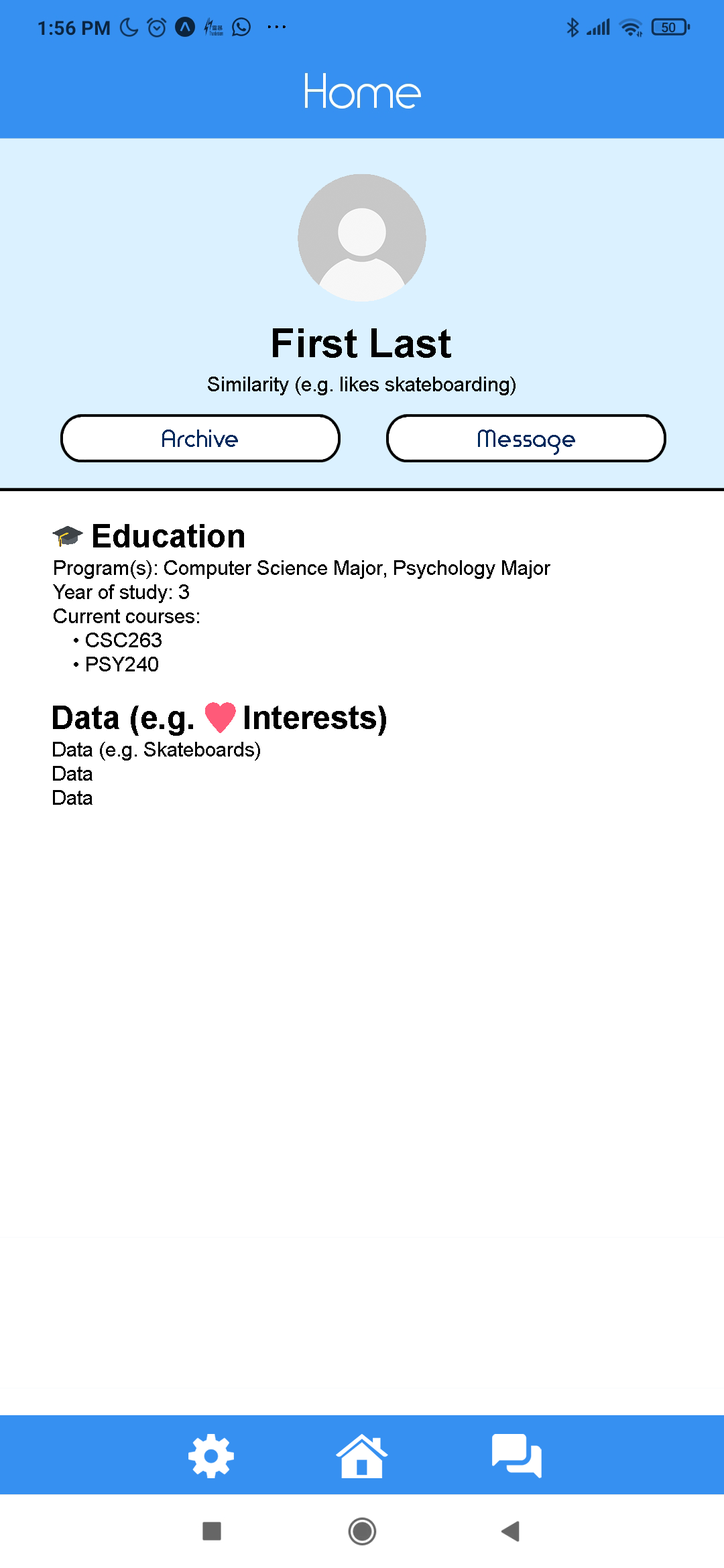
<style>
.page{position:relative;width:724px;height:1568px;background:#ffffff}
.page>*{position:absolute;margin:0}
.t1{font:40.2px "Arial-BoldMT";color:#000000}
.t2{font:20.1px "ArialMT";color:#000000}
.t3{font:24.1px "TimeBurner-Bold";color:#00295d}
.t4{font:32.2px "Arial-BoldMT";color:#000000}
.t5{font:32.2px "EmojiOneColor";color:#000000}
</style>
<div class="page">
<p class="t1" style="left:273px;top:328px;width:178px;height:30px">First Last</p>
<p class="t2" style="left:208px;top:377px;width:307px;height:18px">Similarity (e.g. likes skateboarding)</p>
<p class="t3" style="left:162px;top:430px;width:76px;height:17px">Archive</p>
<p class="t3" style="left:478px;top:430px;width:97px;height:25px">Message</p>
<p class="t4" style="left:52px;top:524px;width:192px;height:23px"><span class="t5">🎓 </span>Education</p>
<p class="t2" style="left:53px;top:560px;width:497px;height:111px">Program(s): Computer Science Major, Psychology Major<br>Year of study: 3<br>Current courses:<br>• CSC263<br>• PSY240</p>
<p class="t4" style="left:53px;top:702px;width:333px;height:34px">Data (e.g. <span class="t5">♥ </span>Interests)</p>
<p class="t2" style="left:53px;top:742px;width:207px;height:63px">Data (e.g. Skateboards)<br>Data<br>Data</p>
</div>
